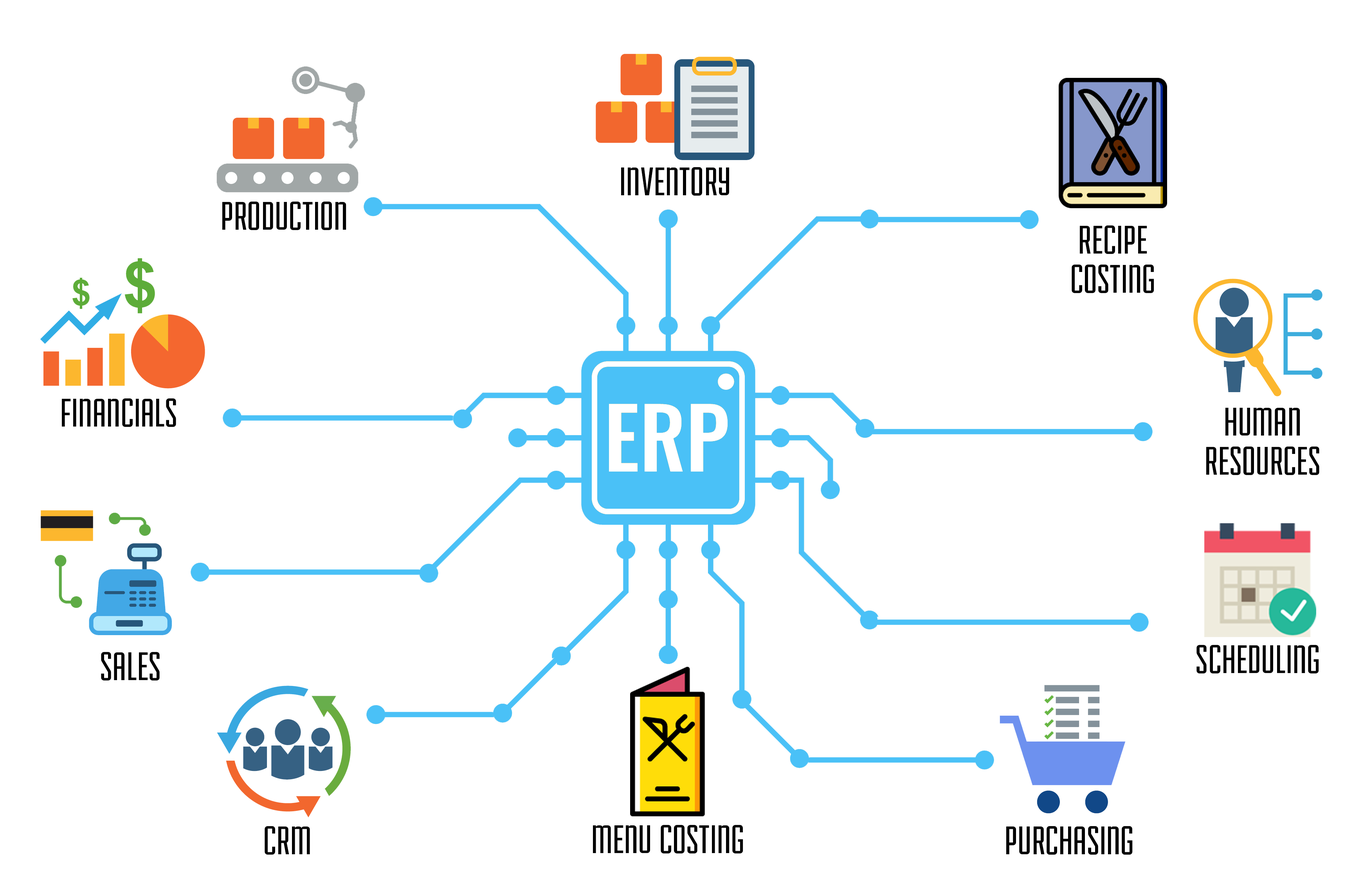
<style>
.page{position:relative;width:1362px;height:875px;background:#ffffff}
.page>*{position:absolute;margin:0}
.t1{font:42.4px "Fairview-Regular";color:#000000}
.t2{font:42.4px/19.6px "Fairview-Regular";color:#000000}
.t3{font:42.4px/39.1px "Fairview-Regular";color:#000000}
</style>
<div class="page">
<p class="t1" style="left:621px;top:167px;width:108px;height:29px">INVENTORY</p>
<p class="t1" style="left:222px;top:202px;width:124px;height:28px">PRODUCTION</p>
<p class="t2" style="left:1072px;top:225px;width:82px;height:68px;text-align:center">RECIPE<br><br>COSTING</p>
<p class="t1" style="left:62px;top:399px;width:114px;height:28px">FINANCIALS</p>
<p class="t3" style="left:1206px;top:408px;width:114px;height:67px;text-align:center">HUMAN<br>RESOURCES</p>
<p class="t1" style="left:101px;top:652px;width:59px;height:29px">SALES</p>
<p class="t1" style="left:1197px;top:645px;width:122px;height:29px">SCHEDULING</p>
<p class="t1" style="left:265px;top:826px;width:45px;height:29px">CRM</p>
<p class="t1" style="left:593px;top:825px;width:150px;height:29px">MENU COSTING</p>
</div>
